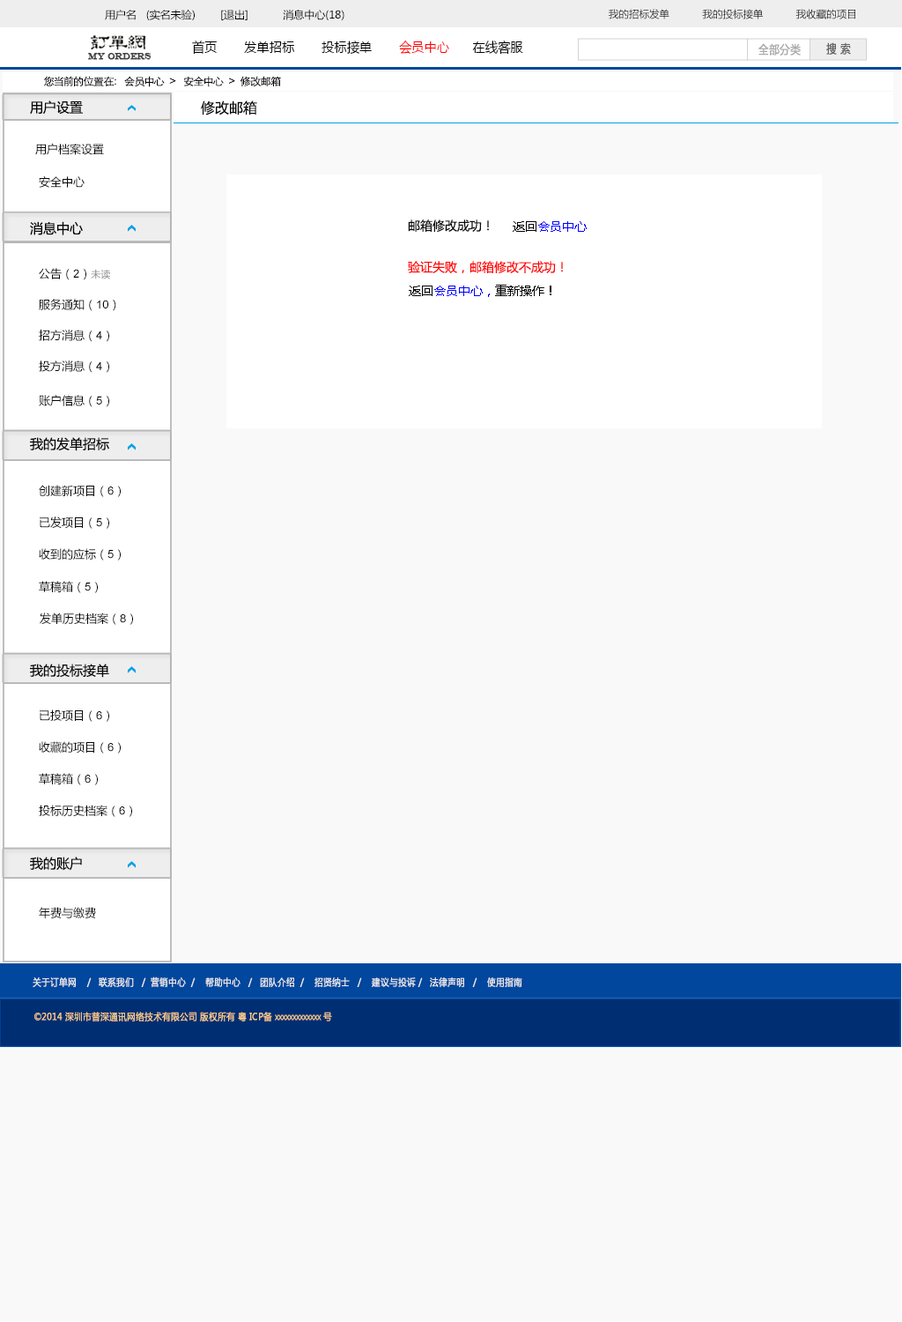
<style>
.page{position:relative;width:902px;height:1322px;background:#f9f9f9}
.page>*{position:absolute;margin:0}
.t1{font:10.6px "MicrosoftYaHei";color:#000000}
.t2{font:10.1px "MicrosoftYaHei";color:#000000}
.t3{font:13.6px "MicrosoftYaHei";color:#000000;font-variant:small-caps;scale:0.94 1}
.t4{font:13.6px "MicrosoftYaHei";color:#ff0000;font-variant:small-caps;scale:0.94 1}
.t5{font:8.7px "EngraversMT";color:#434343;font-variant:small-caps;font-weight:bold;scale:0.86 1}
.t6{font:11.6px "MicrosoftYaHei";color:#aaaaaa;font-variant:small-caps;font-weight:bold;scale:0.86 1}
.t7{font:11.6px "MicrosoftYaHei";color:#626262;font-variant:small-caps;font-weight:bold;scale:0.86 1}
.t8{font:10.6px "STXihei";color:#060606}
.t9{font:13.2px "MicrosoftYaHei";color:#060606}
.t10{font:14.1px "MicrosoftYaHei";color:#060606}
.t11{font:11.5px "MicrosoftYaHei";color:#060606}
.t12{font:12.3px "MicrosoftYaHei";color:#060606}
.t13{font:12.3px "MicrosoftYaHei";color:#0000ff}
.t14{font:12.3px "MicrosoftYaHei";color:#000000}
.t15{font:11.5px "ArialMT";color:#060606}
.t16{font:9.7px "MicrosoftYaHei";color:#888584}
.t17{font:12.3px "MicrosoftYaHei";color:#ff0000}
.t18{font:9.7px "MicrosoftYaHei";color:#eeeeee;font-variant:small-caps;font-weight:bold;scale:0.86 1}
.t19{font:13.6px "STXihei";color:#eeeeee;font-variant:small-caps;font-weight:bold;scale:0.86 1}
.t20{font:9.5px "MicrosoftYaHei";color:#facd89;font-variant:small-caps;font-weight:bold;scale:0.88 1}
.t21{font:9.5px "MicrosoftYaHei";color:#eeeeee;font-variant:small-caps;font-weight:bold;scale:0.88 1}
</style>
<div class="page">
<p class="t1" style="left:105px;top:10px;width:240px;height:10px">用户名   (实名未验)        [退出]           消息中心(18)</p>
<p class="t2" style="left:609px;top:9px;width:247px;height:10px">我的招标发单           我的投标接单           我收藏的项目</p>
<p class="t3" style="left:192px;top:41px;width:331px;height:14px">首页       发单招标       投标接单       <span class="t4">会员中心</span>      在线客服</p>
<p class="t5" style="left:88px;top:53px;width:64px;height:7px">MY ORDERS</p>
<p class="t6" style="left:759px;top:43px;width:42px;height:13px">全部分类</p>
<p class="t7" style="left:826px;top:42px;width:25px;height:13px">搜 索</p>
<p class="t8" style="left:43px;top:76px;width:238px;height:11px">您当前的位置在：  会员中心  &gt;   安全中心  &gt;  修改邮箱</p>
<p class="t9" style="left:30px;top:100px;width:53px;height:15px">用户设置</p>
<p class="t10" style="left:201px;top:100px;width:56px;height:15px">修改邮箱</p>
<p class="t11" style="left:35px;top:143px;width:69px;height:12px">用户档案设置</p>
<p class="t11" style="left:39px;top:176px;width:46px;height:12px">安全中心</p>
<p class="t9" style="left:30px;top:221px;width:53px;height:14px">消息中心</p>
<p class="t12" style="left:408px;top:219px;width:81px;height:13px">邮箱修改成功！</p>
<p class="t13" style="left:513px;top:221px;width:74px;height:11px"><span class="t14">返回</span>会员中心</p>
<p class="t11" style="left:39px;top:268px;width:71px;height:12px">公告（<span class="t15">2</span>）<span class="t16">未读</span></p>
<p class="t17" style="left:408px;top:261px;width:155px;height:12px">验证失败，邮箱修改不成功！</p>
<p class="t13" style="left:409px;top:285px;width:143px;height:12px"><span class="t14">返回</span>会员中心，<span class="t14">重新操作！</span></p>
<p class="t11" style="left:39px;top:299px;width:77px;height:12px">服务通知（<span class="t15">10</span>）</p>
<p class="t11" style="left:39px;top:330px;width:70px;height:12px">招方消息（<span class="t15">4</span>）</p>
<p class="t11" style="left:39px;top:360px;width:70px;height:13px">投方消息（<span class="t15">4</span>）</p>
<p class="t11" style="left:39px;top:395px;width:70px;height:12px">账户信息（<span class="t15">5</span>）</p>
<p class="t9" style="left:30px;top:437px;width:79px;height:14px">我的发单招标</p>
<p class="t11" style="left:39px;top:485px;width:82px;height:12px">创建新项目（<span class="t15">6</span>）</p>
<p class="t11" style="left:40px;top:516px;width:69px;height:13px">已发项目（<span class="t15">5</span>）</p>
<p class="t11" style="left:39px;top:548px;width:82px;height:12px">收到的应标（<span class="t15">5</span>）</p>
<p class="t11" style="left:39px;top:581px;width:59px;height:12px">草稿箱（<span class="t15">5</span>）</p>
<p class="t11" style="left:40px;top:612px;width:93px;height:13px">发单历史档案（<span class="t15">8</span>）</p>
<p class="t9" style="left:30px;top:663px;width:79px;height:15px">我的投标接单</p>
<p class="t11" style="left:40px;top:709px;width:69px;height:13px">已投项目（<span class="t15">6</span>）</p>
<p class="t11" style="left:39px;top:741px;width:82px;height:12px">收藏的项目（<span class="t15">6</span>）</p>
<p class="t11" style="left:39px;top:773px;width:59px;height:12px">草稿箱（<span class="t15">6</span>）</p>
<p class="t11" style="left:39px;top:804px;width:93px;height:13px">投标历史档案（<span class="t15">6</span>）</p>
<p class="t9" style="left:30px;top:856px;width:52px;height:15px">我的账户</p>
<p class="t11" style="left:39px;top:907px;width:57px;height:11px">年费与缴费</p>
<p class="t18" style="left:33px;top:976px;width:489px;height:11px"><span class="t19"><br><br></span>关于订单网    /   联系我们   /  营销中心  /    帮助中心   /   团队介绍  /    招贤纳士   /    建议与投诉 /   法律声明   /    使用指南</p>
<p class="t20" style="left:34px;top:1011px;width:298px;height:10px"><span class="t21"> </span>©2014 深圳市普深通讯网络技术有限公司 版权所有 粤 ICP备 xxxxxxxxxxxxx 号</p>
</div>
